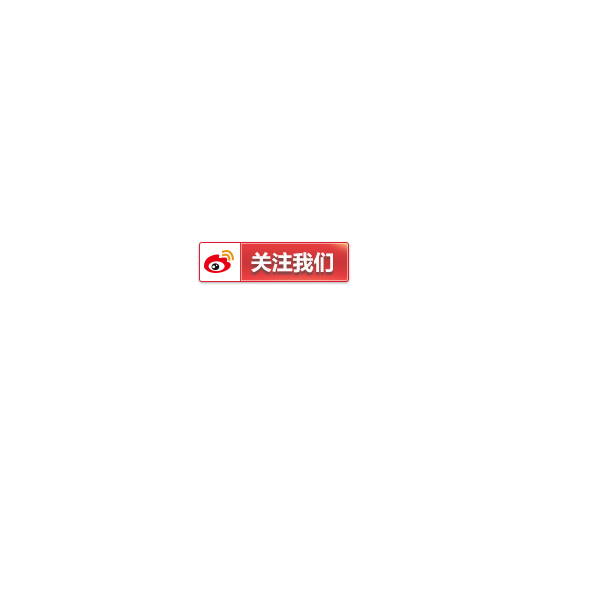
<style>
.page{position:relative;width:600px;height:600px;background:#ffffff}
.page>*{position:absolute;margin:0}
.t1{font:20.8px "MicrosoftYaHei-Bold";color:#fcf9f9}
</style>
<div class="page">
<p class="t1" style="left:251px;top:252px;width:82px;height:21px">关注我们</p>
</div>
